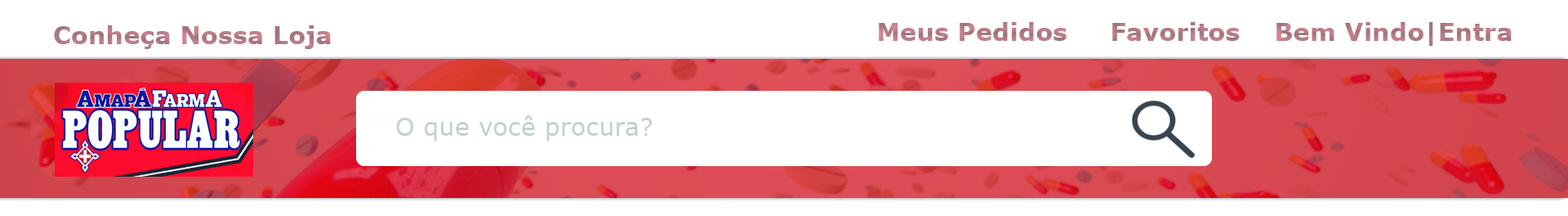
<style>
.page{position:relative;width:1568px;height:216px;background:#ffffff}
.page>*{position:absolute;margin:0}
.t1{font:9.8px "Verdana-Bold";color:#b47c86}
.t2{font:9.8px "Verdana-Bold";color:#b47c87}
.t3{font:9.8px "Verdana";color:#c3d0ce}
</style>
<div class="page">
<p class="t1" style="left:54px;top:25px;width:277px;height:24px;text-align:center">Conheça Nossa Loja</p>
<p class="t2" style="left:879px;top:22px;width:633px;height:24px;text-align:center">Meus Pedidos     Favoritos    Bem Vindo|Entra</p>
<p class="t3" style="left:396px;top:115px;width:257px;height:25px;text-align:center">O que você procura?</p>
</div>
